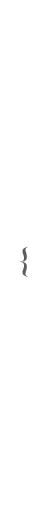
<style>
.page{position:relative;width:50px;height:525px;background:#ffffff}
.page>*{position:absolute;margin:0}
.t1{font:30px "HoeflerTitling-HTF-BdRoman";letter-spacing:0.02em;color:#5c5c5c}
</style>
<div class="page">
<p class="t1" style="left:20px;top:246px;width:8px;height:31px">{</p>
</div>
